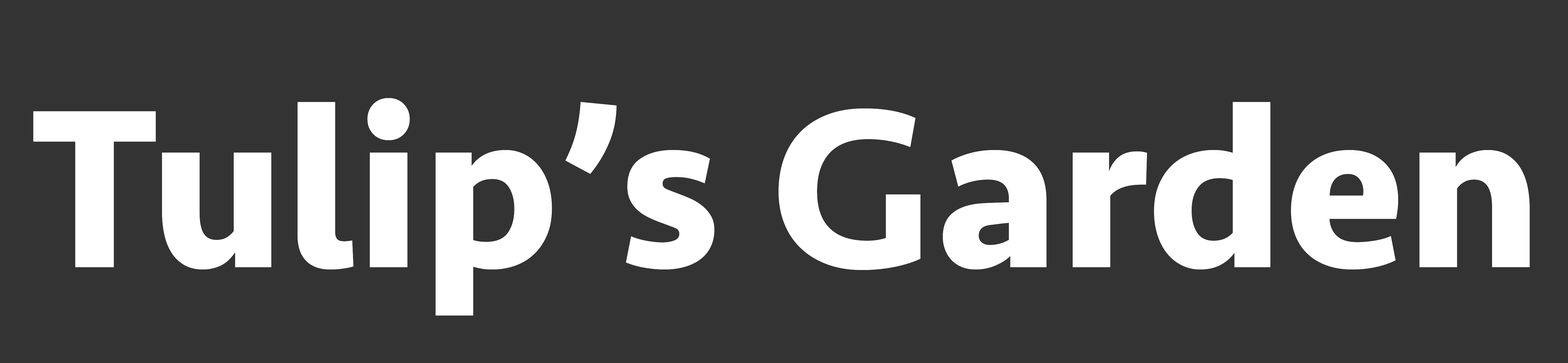
<style>
.page{position:relative;width:1568px;height:363px;background:#333333}
.page>*{position:absolute;margin:0}
.t1{font:234.4px "Seravek-Bold";color:#ffffff}
</style>
<div class="page">
<p class="t1" style="left:33px;top:98px;width:1497px;height:218px">Tulip’s Garden</p>
<p class="t1" style="left:33px;top:98px;width:1497px;height:218px">Tulip’s Garden</p>
</div>
